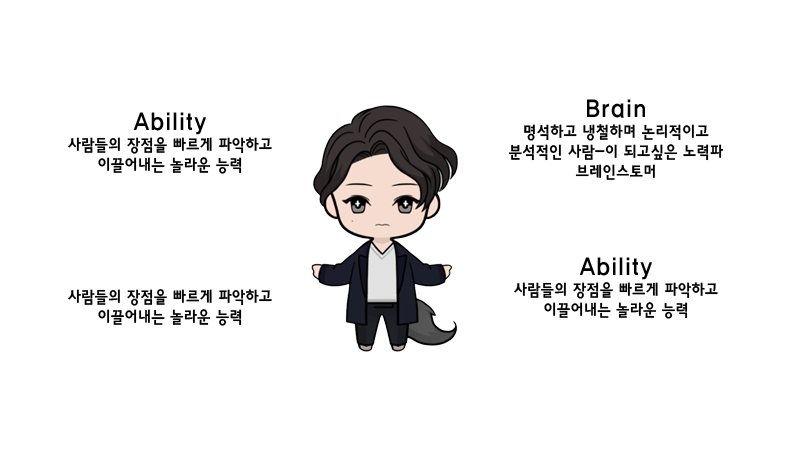
<style>
.page{position:relative;width:800px;height:450px;background:#ffffff}
.page>*{position:absolute;margin:0}
.t1{font:16.7px "HaanYGodic24";color:#000000;scale:0.9 1}
.t2{font:25px "HaanYGodic24";color:#000000;scale:0.9 1}
</style>
<div class="page">
<p class="t1" style="left:508px;top:99px;width:216px;height:81px;text-align:center"><span class="t2">Brain<br></span>명석하고 냉철하며 논리적이고 분석적인 사람-이 되고싶은 노력파 브레인스토머</p>
<p class="t1" style="left:68px;top:112px;width:204px;height:62px;text-align:center"><span class="t2">Ability<br></span>사람들의 장점을 빠르게 파악하고 이끌어내는 놀라운 능력</p>
<p class="t1" style="left:514px;top:257px;width:204px;height:62px;text-align:center"><span class="t2">Ability<br></span>사람들의 장점을 빠르게 파악하고 이끌어내는 놀라운 능력</p>
<p class="t1" style="left:68px;top:289px;width:204px;height:37px"><span class="t2"><br></span>사람들의 장점을 빠르게 파악하고 이끌어내는 놀라운 능력</p>
</div>
